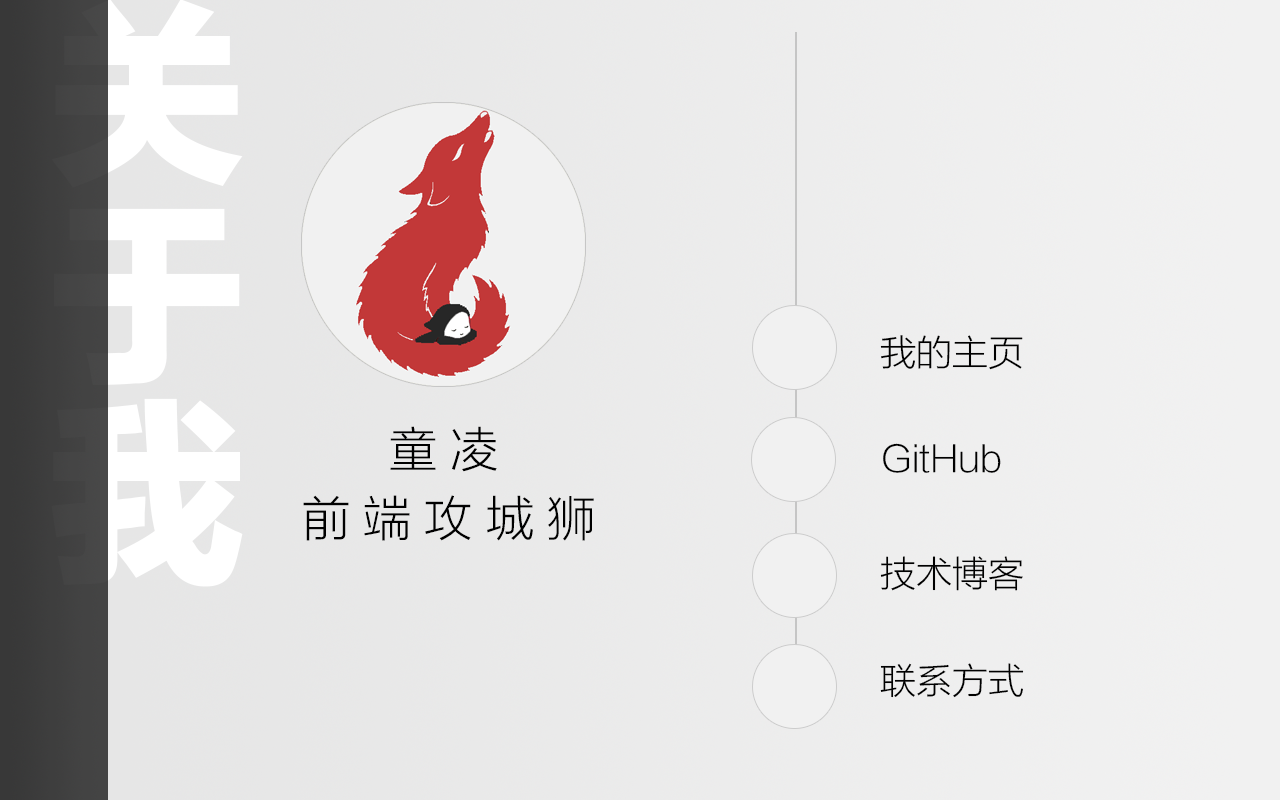
<style>
.page{position:relative;width:1280px;height:800px}
.page>*{position:absolute;margin:0}
.t1{font:36px "FZLTXHK--GBK1-0";color:#000000}
.t2{font:48px "FZLTXHK--GBK1-0";color:#000000}
</style>
<div class="page">
<p class="t1" style="left:880px;top:335px;width:143px;height:35px">我的主页</p>
<p class="t2" style="left:390px;top:426px;width:107px;height:46px">童 凌</p>
<p class="t1" style="left:883px;top:443px;width:118px;height:30px">GitHub</p>
<p class="t2" style="left:303px;top:495px;width:291px;height:46px">前 端 攻 城 狮</p>
<p class="t1" style="left:880px;top:556px;width:143px;height:35px">技术博客</p>
<p class="t1" style="left:880px;top:663px;width:144px;height:35px">联系方式</p>
</div>
